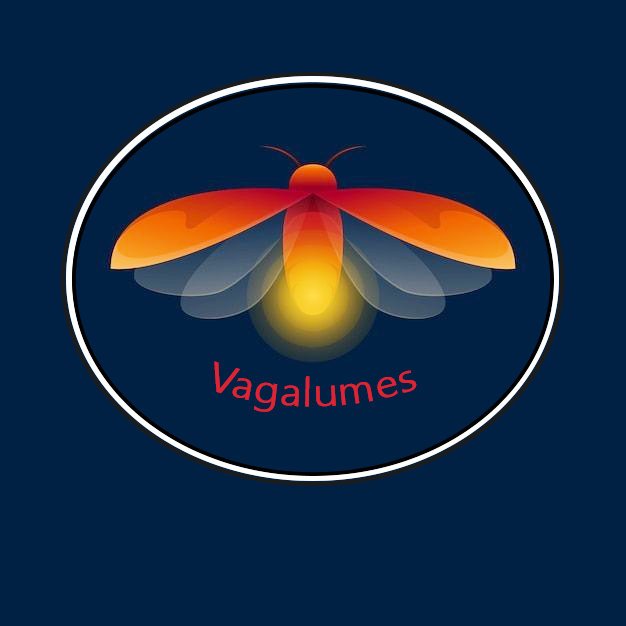
<style>
.page{position:relative;width:626px;height:626px;background:#012144}
.page>*{position:absolute;margin:0}
.t1{font:40px "SegoeUI";color:#de2433}
</style>
<div class="page">
<p class="t1" style="left:214px;top:361px;width:203px;height:51px">Vagalumes</p>
</div>
